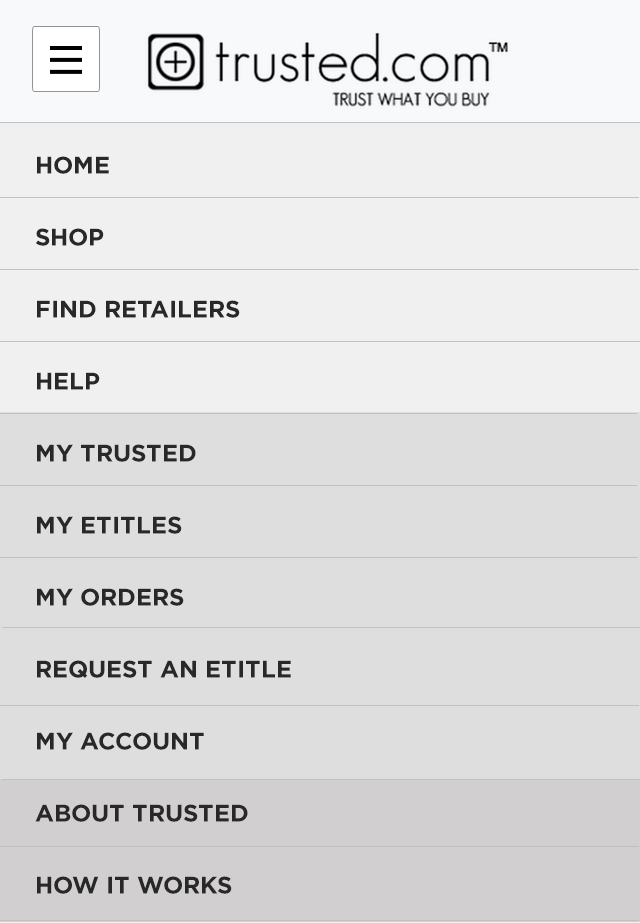
<style>
.page{position:relative;width:640px;height:923px;background:#dedede}
.page>*{position:absolute;margin:0}
.t1{font:24px/72px "GothamHTF-Bold";color:#282828;text-transform:uppercase}
</style>
<div class="page">
<p class="t1" style="left:35px;top:156px;width:256px;height:738px">home<br>shop<br>find retailers<br>help<br>My Trusted<br>My eTitles<br>My Orders<br>Request an eTitle<br>My Account<br>about trusted<br>how it works</p>
</div>
